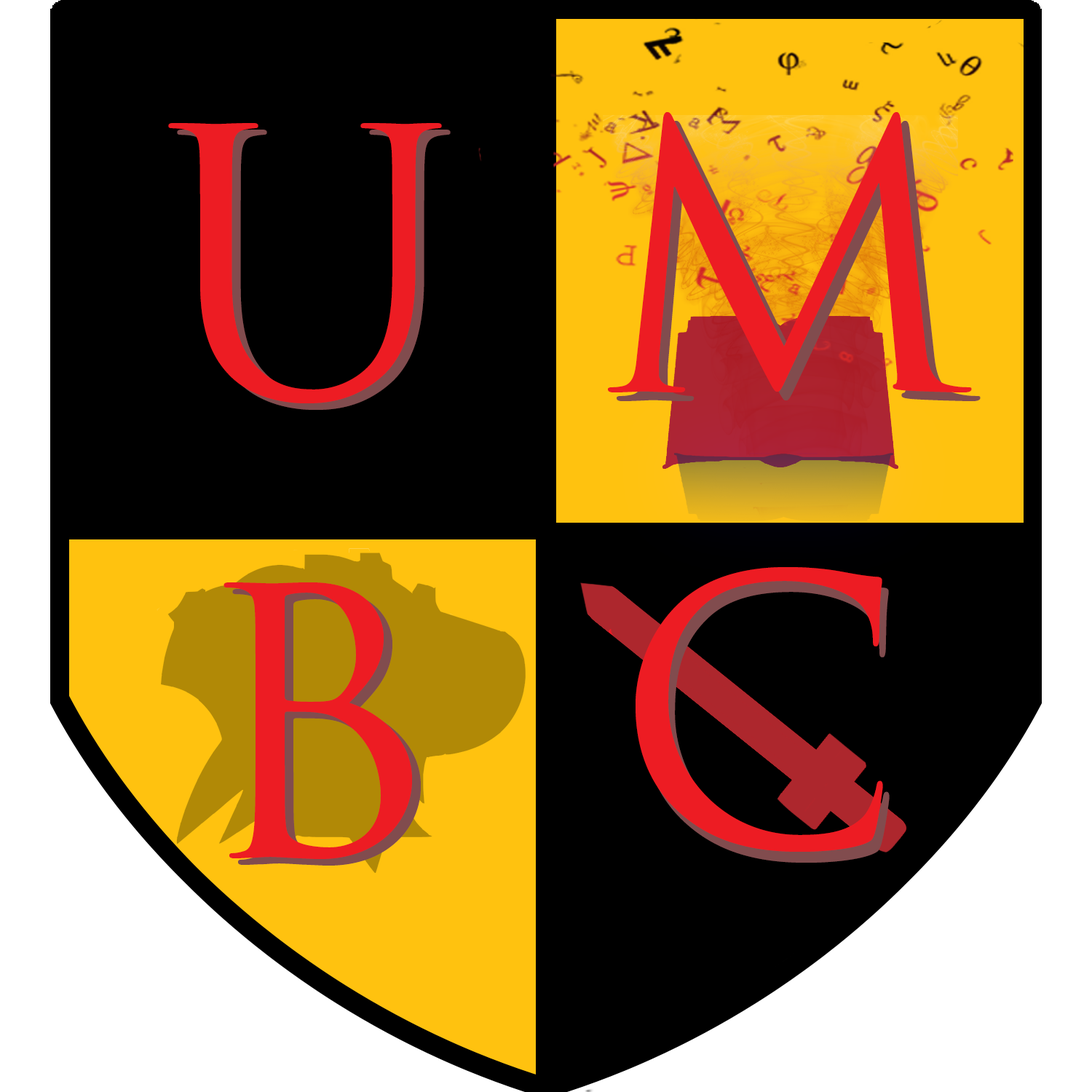
<style>
.page{position:relative;width:1092px;height:1092px;background:#000000}
.page>*{position:absolute;margin:0}
.t1{font:364px "TrajanPro-Regular";color:#ed1c23}
.t2{font:364px "TrajanPro-Regular"}
</style>
<div class="page">
<p class="t1" style="left:608px;top:112px;width:364px;height:280px">M</p>
<p class="t1" style="left:168px;top:123px;width:274px;height:280px">U</p>
<p class="t2" style="left:617px;top:121px;width:364px;height:280px">M</p>
<p class="t2" style="left:177px;top:130px;width:274px;height:280px">U</p>
<p class="t1" style="left:636px;top:567px;width:247px;height:285px">C</p>
<p class="t2" style="left:642px;top:578px;width:248px;height:285px">C</p>
<p class="t1" style="left:223px;top:582px;width:189px;height:277px">B</p>
<p class="t2" style="left:232px;top:589px;width:189px;height:277px">B</p>
</div>
